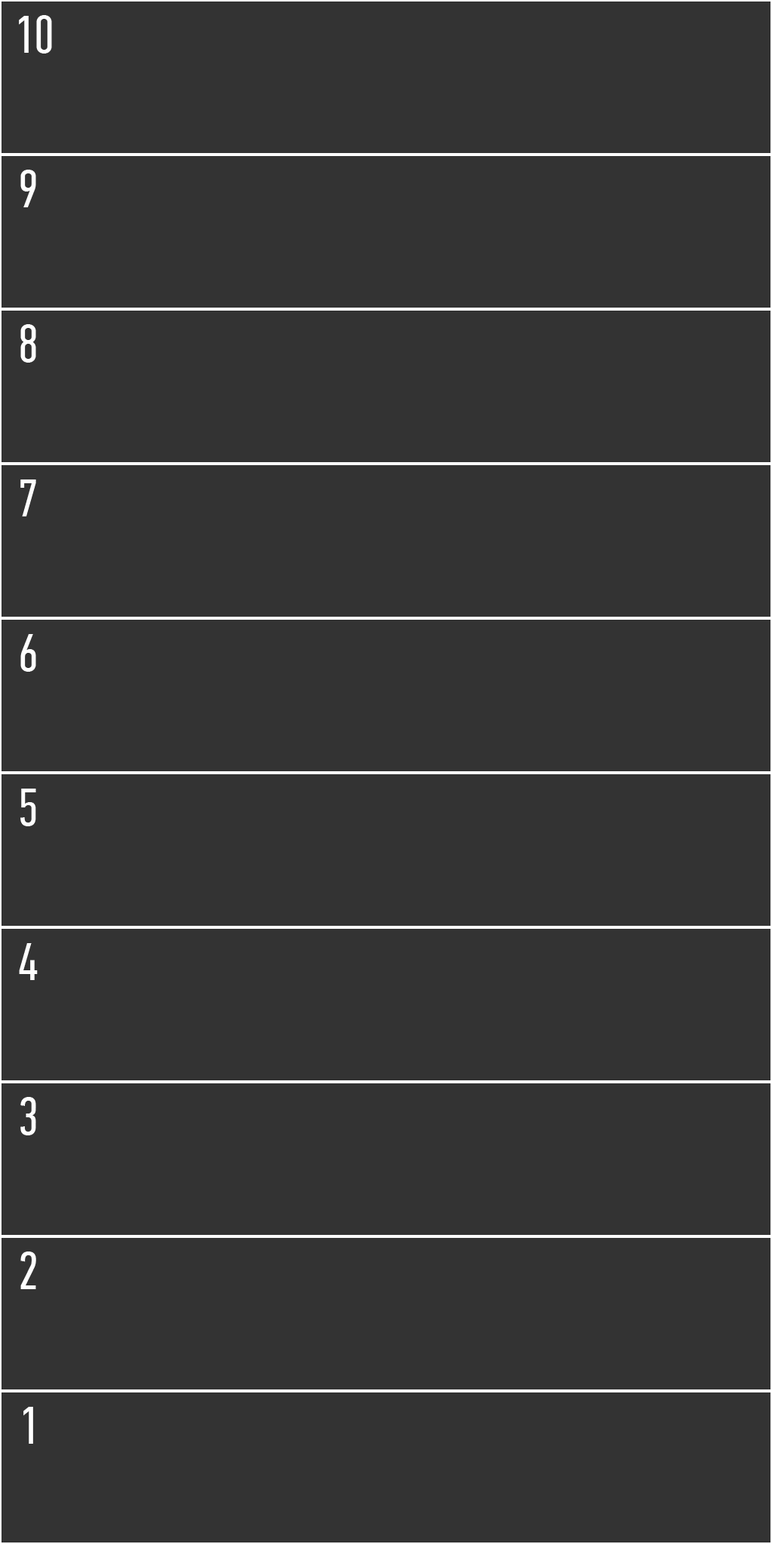
<style>
.page{position:relative;width:772px;height:1544px;background:#333333}
.page>*{position:absolute;margin:0}
.t1{font:53.5px "PFDinTextCompPro-Regular";color:#ffffff}
</style>
<div class="page">
<p class="t1" style="left:19px;top:15px;width:33px;height:39px">10</p>
<p class="t1" style="left:20px;top:170px;width:16px;height:37px">9</p>
<p class="t1" style="left:20px;top:324px;width:16px;height:39px">8</p>
<p class="t1" style="left:20px;top:480px;width:16px;height:37px">7</p>
<p class="t1" style="left:20px;top:634px;width:16px;height:38px">6</p>
<p class="t1" style="left:20px;top:789px;width:16px;height:37px">5</p>
<p class="t1" style="left:19px;top:943px;width:19px;height:37px">4</p>
<p class="t1" style="left:20px;top:1097px;width:16px;height:39px">3</p>
<p class="t1" style="left:20px;top:1252px;width:16px;height:37px">2</p>
<p class="t1" style="left:23px;top:1407px;width:10px;height:37px">1</p>
</div>
